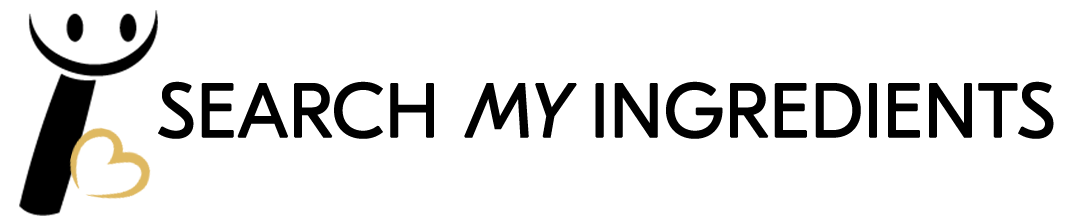
<style>
.page{position:relative;width:1080px;height:218px;background:#ffffff}
.page>*{position:absolute;margin:0}
.t1{font:75px "GTEestiDisplayTrial-Lt";color:#000000;font-weight:bold}
.t2{font:75px "GTEestiDisplayTrial-Lt";color:#000000;font-weight:bold;font-style:italic}
</style>
<div class="page">
<p class="t1" style="left:158px;top:81px;width:896px;height:58px">SEARCH <span class="t2">MY </span>INGREDIENTS</p>
</div>
